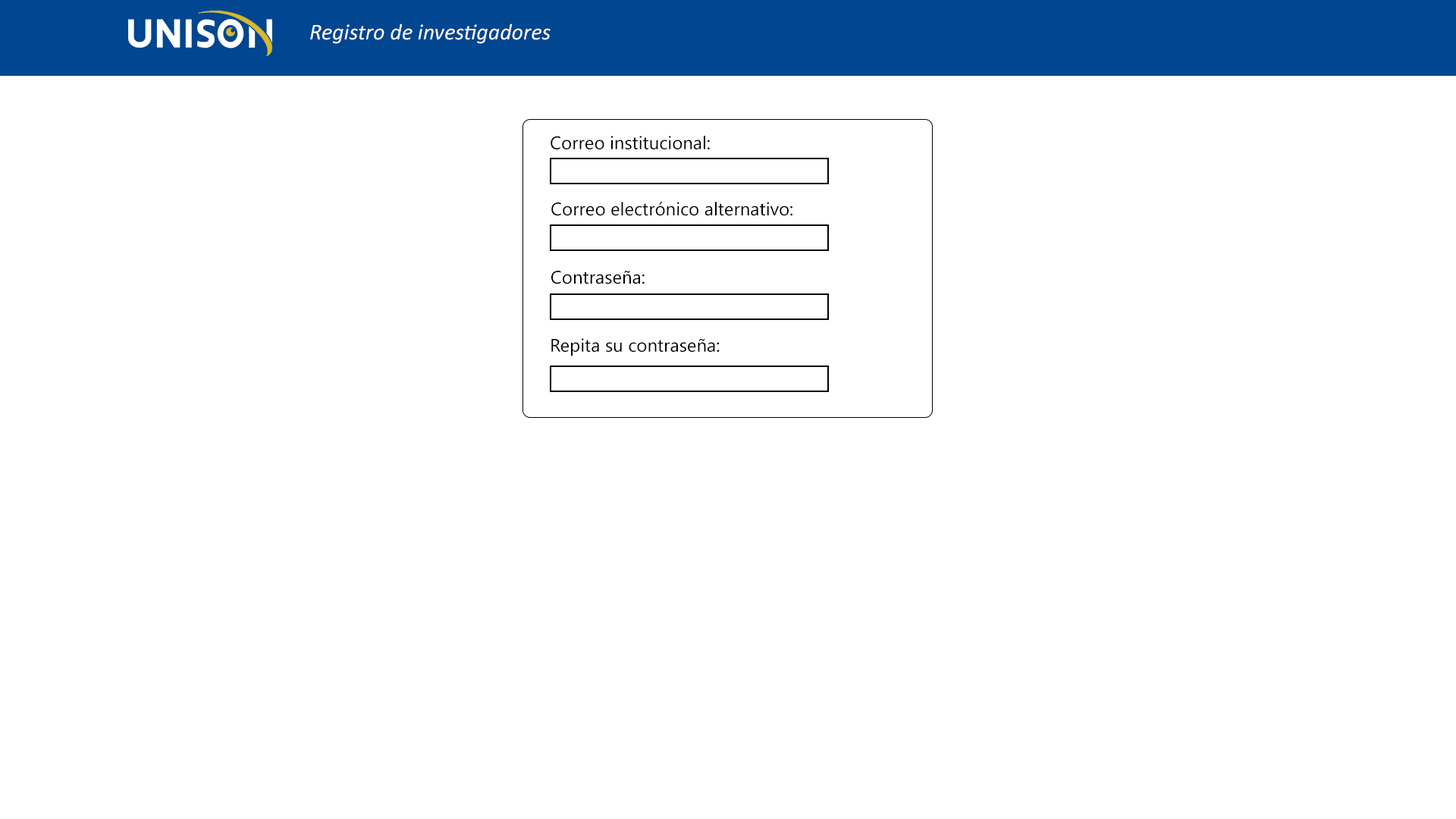
<style>
.page{position:relative;width:1456px;height:819px;background:#ffffff}
.page>*{position:absolute;margin:0}
.t1{font:22.7px "Calibri-Italic";color:#fff9fb}
.t2{font:18.2px "SegoeUI";color:#000000}
</style>
<div class="page">
<p class="t1" style="left:310px;top:24px;width:241px;height:20px">Registro de investigadores</p>
<p class="t2" style="left:551px;top:136px;width:159px;height:13px">Correo institucional:</p>
<p class="t2" style="left:551px;top:202px;width:241px;height:14px">Correo electrónico alternativo:</p>
<p class="t2" style="left:551px;top:270px;width:94px;height:14px">Contraseña:</p>
<p class="t2" style="left:551px;top:338px;width:169px;height:18px">Repita su contraseña:</p>
</div>
